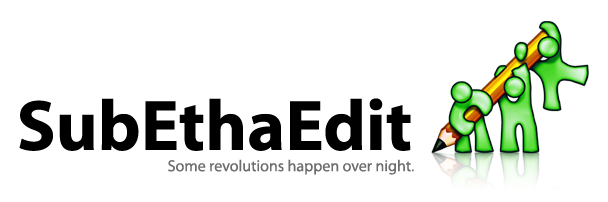
<style>
.page{position:relative;width:608px;height:202px;background:#ffffff}
.page>*{position:absolute;margin:0}
.t1{font:72px "Myriad-Bold";color:#000000}
.t2{font:16px "Myriad-Roman";color:#6e6d6d}
</style>
<div class="page">
<p class="t1" style="left:19px;top:98px;width:392px;height:53px">SubEthaEdit</p>
<p class="t2" style="left:168px;top:159px;width:246px;height:16px">Some revolutions happen over night.</p>
</div>
